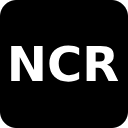
<style>
.page{position:relative;width:128px;height:128px;background:#000000}
.page>*{position:absolute;margin:0}
.t1{font:48px "DejaVuSans-Bold";color:#ffffff}
</style>
<div class="page">
<p class="t1" style="left:11px;top:45px;width:108px;height:37px">NCR</p>
</div>
